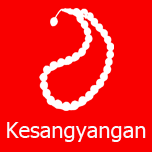
<style>
.page{position:relative;width:152px;height:152px;background:#f90000}
.page>*{position:absolute;margin:0}
.t1{font:22px "Tahoma";color:#f8f9fc}
</style>
<div class="page">
<p class="t1" style="left:7px;top:122px;width:139px;height:20px">Kesangyangan</p>
</div>
